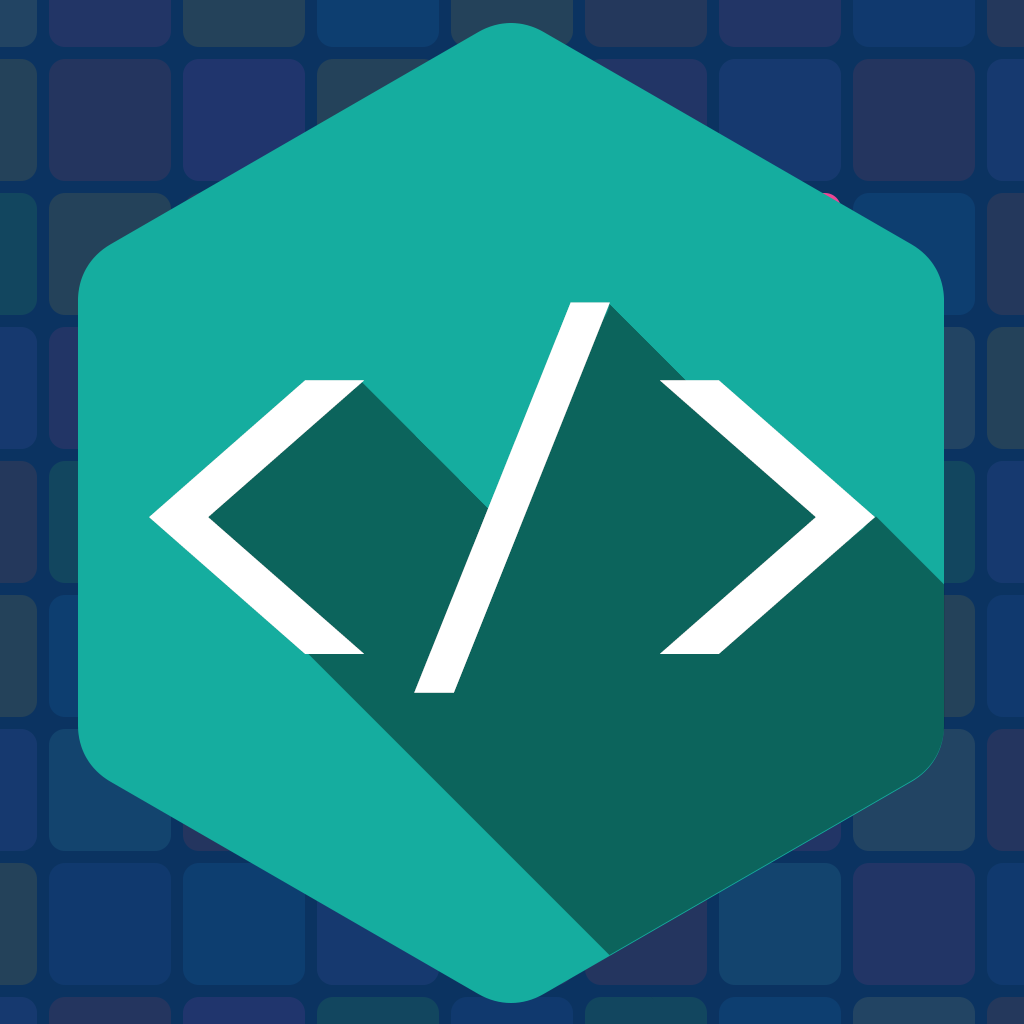
<style>
.page{position:relative;width:1024px;height:1024px;background:#15ad9f}
.page>*{position:absolute;margin:0}
.t1{font:468.2px "Silom";color:#ffffff}
</style>
<div class="page">
<p class="t1" style="left:149px;top:302px;width:726px;height:391px">&lt;/&gt;</p>
</div>
